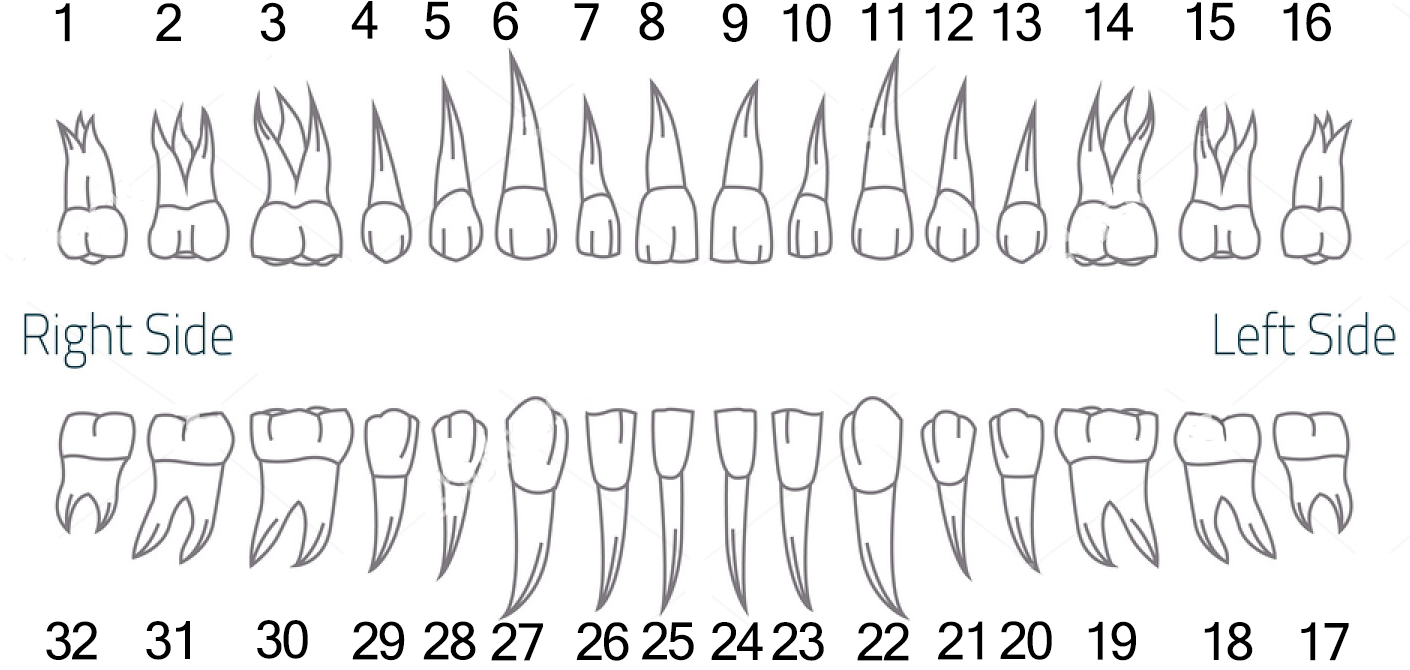
<style>
.page{position:relative;width:1410px;height:670px;background:#ffffff}
.page>*{position:absolute;margin:0}
.t1{font:12px "Kartika";letter-spacing:-0.05em;color:#000000}
</style>
<div class="page">
<p class="t1" style="left:55px;top:3px;width:15px;height:39px">1</p>
<p class="t1" style="left:156px;top:3px;width:25px;height:38px">2</p>
<p class="t1" style="left:260px;top:2px;width:26px;height:40px">3</p>
<p class="t1" style="left:351px;top:1px;width:27px;height:38px">4</p>
<p class="t1" style="left:425px;top:1px;width:25px;height:39px">5</p>
<p class="t1" style="left:493px;top:1px;width:25px;height:40px">6</p>
<p class="t1" style="left:574px;top:3px;width:25px;height:38px">7</p>
<p class="t1" style="left:639px;top:2px;width:26px;height:39px">8</p>
<p class="t1" style="left:722px;top:3px;width:26px;height:39px">9</p>
<p class="t1" style="left:783px;top:3px;width:48px;height:40px">10</p>
<p class="t1" style="left:862px;top:2px;width:41px;height:39px">11</p>
<p class="t1" style="left:925px;top:3px;width:48px;height:38px">12</p>
<p class="t1" style="left:993px;top:2px;width:48px;height:40px">13</p>
<p class="t1" style="left:1085px;top:2px;width:48px;height:39px">14</p>
<p class="t1" style="left:1187px;top:2px;width:48px;height:39px">15</p>
<p class="t1" style="left:1283px;top:2px;width:48px;height:40px">16</p>
<p class="t1" style="left:46px;top:621px;width:51px;height:39px">32</p>
<p class="t1" style="left:146px;top:621px;width:44px;height:39px">31</p>
<p class="t1" style="left:257px;top:620px;width:51px;height:39px">30</p>
<p class="t1" style="left:352px;top:621px;width:53px;height:40px">29</p>
<p class="t1" style="left:423px;top:621px;width:53px;height:39px">28</p>
<p class="t1" style="left:491px;top:622px;width:52px;height:39px">27</p>
<p class="t1" style="left:576px;top:622px;width:53px;height:39px">26</p>
<p class="t1" style="left:642px;top:621px;width:52px;height:40px">25</p>
<p class="t1" style="left:711px;top:622px;width:52px;height:38px">24</p>
<p class="t1" style="left:772px;top:622px;width:52px;height:39px">23</p>
<p class="t1" style="left:857px;top:622px;width:52px;height:39px">22</p>
<p class="t1" style="left:938px;top:621px;width:45px;height:39px">21</p>
<p class="t1" style="left:1000px;top:621px;width:52px;height:39px">20</p>
<p class="t1" style="left:1088px;top:621px;width:48px;height:40px">19</p>
<p class="t1" style="left:1204px;top:622px;width:49px;height:39px">18</p>
<p class="t1" style="left:1301px;top:622px;width:48px;height:39px">17</p>
</div>
